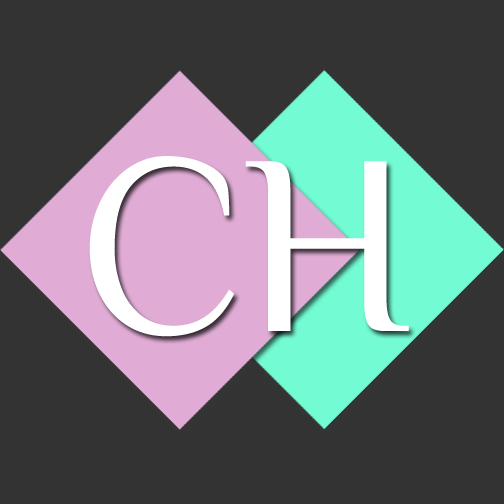
<style>
.page{position:relative;width:504px;height:504px;background:#333333}
.page>*{position:absolute;margin:0}
.t1{font:257.1px "Philosopher-Regular";color:#ffffff;scale:0.96 1}
</style>
<div class="page">
<p class="t1" style="left:89px;top:156px;width:320px;height:181px">CH</p>
</div>
